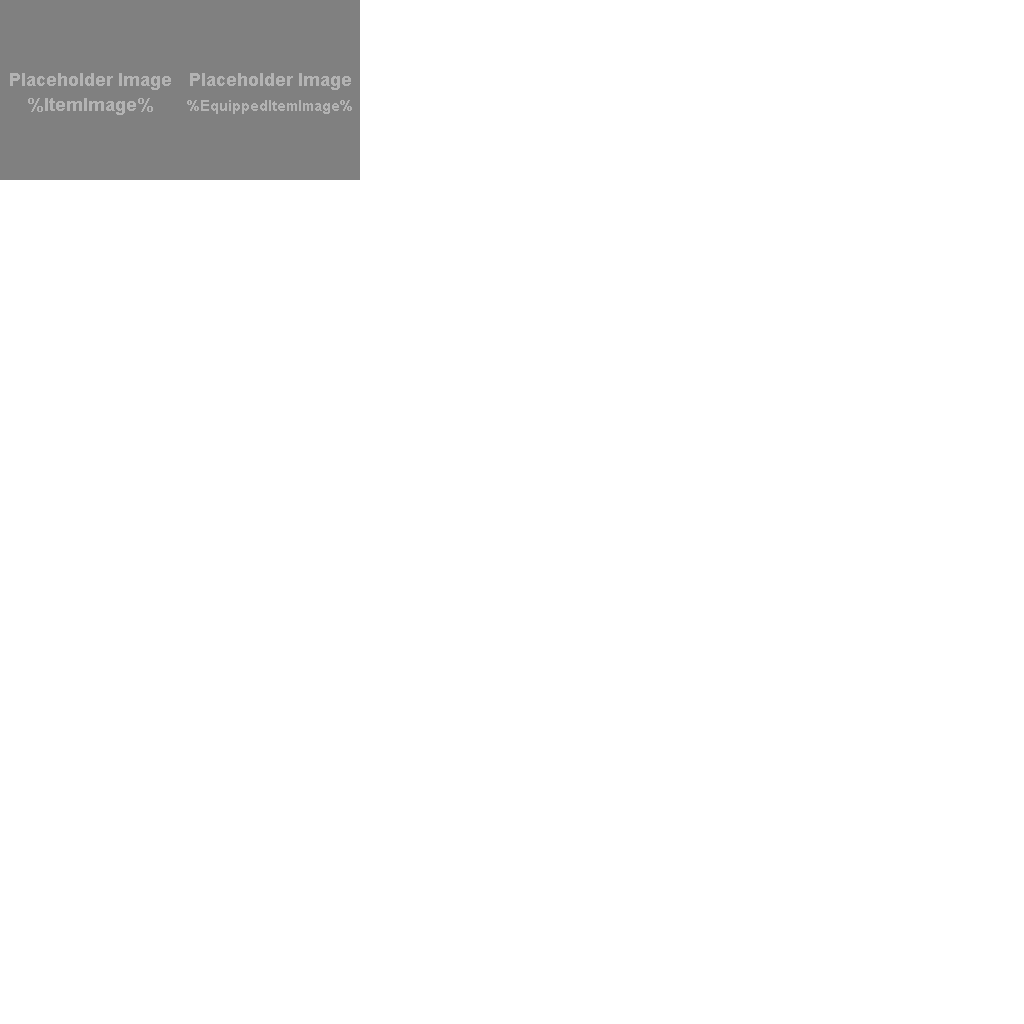
<style>
.page{position:relative;width:1024px;height:1024px;background:#ffffff}
.page>*{position:absolute;margin:0}
.t1{font:18px "Arial-BoldMT";color:#b3b3b3}
.t2{font:15px "Arial-BoldMT";color:#b3b3b3}
</style>
<div class="page">
<p class="t1" style="left:10px;top:73px;width:161px;height:17px">Placeholder Image</p>
<p class="t1" style="left:190px;top:73px;width:161px;height:17px">Placeholder Image</p>
<p class="t1" style="left:28px;top:98px;width:125px;height:17px">%ItemImage%</p>
<p class="t2" style="left:187px;top:100px;width:165px;height:14px">%EquippedItemImage%</p>
</div>
